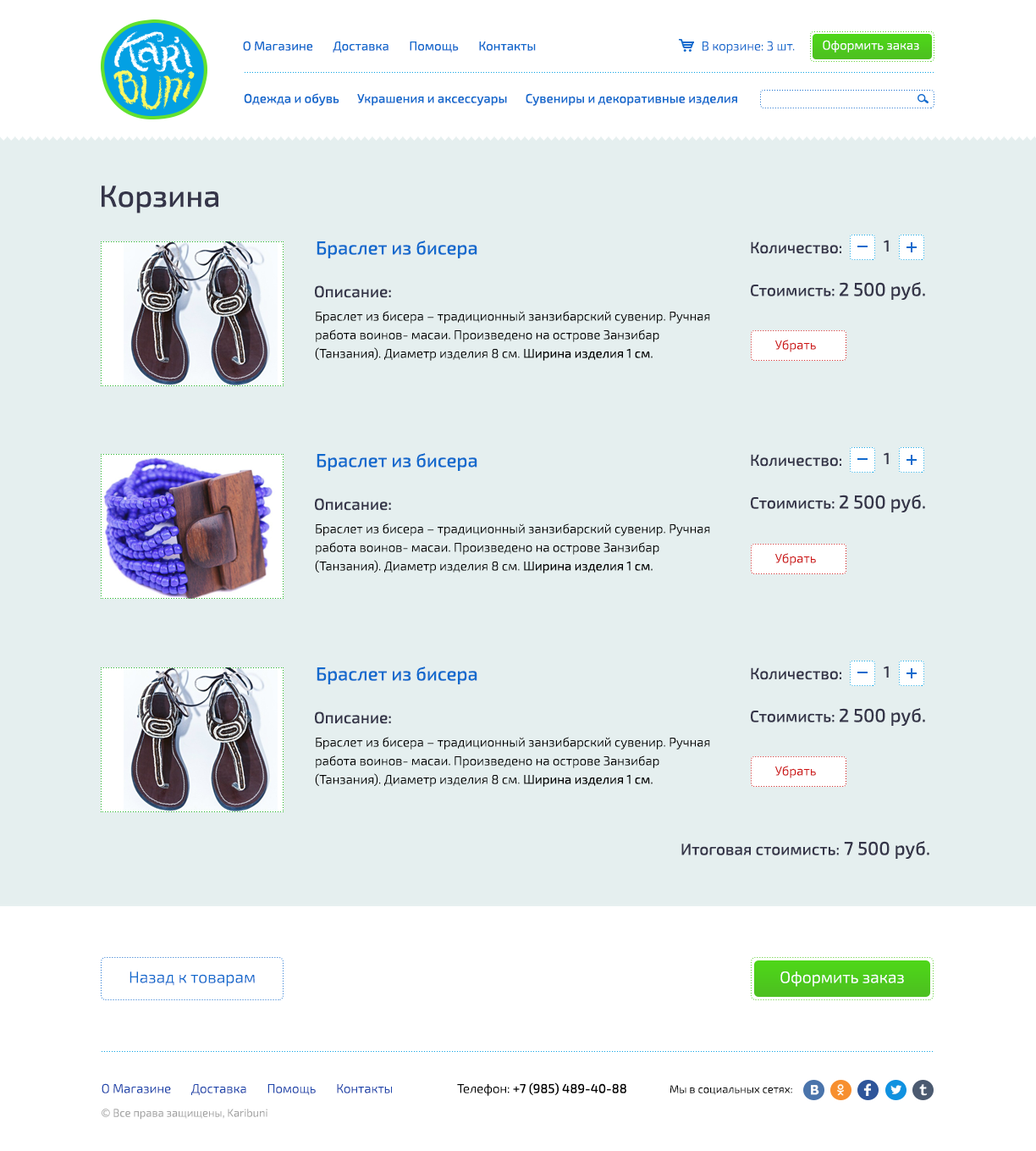
<style>
.page{position:relative;width:1036px;height:1151px;background:#e5efef}
.page>*{position:absolute;margin:0}
.t1{font:12.7px "Exo2-Regular";color:#126acd}
.t2{font:12.7px "Exo2-Light";color:#126acd}
.t3{font:12.7px "Exo2-Light";color:#ffffff}
.t4{font:12.7px "Exo2-Medium";color:#126acd}
.t5{font:30.5px "Exo2-Medium";color:#353549}
.t6{font:18.6px "Exo2-Medium";color:#126acd}
.t7{font:16.1px "Exo2-Medium";color:#353549}
.t8{font:18.6px "Exo2-Medium";color:#353549}
.t9{font:12.7px/18.6px "Exo2-Light";color:#000000}
.t10{font:12.7px/18.6px "Exo2-Regular";color:#000000}
.t11{font:12.7px "Exo2-Light";color:#cd1212}
.t12{font:16.1px "Exo2-Light";color:#126acd}
.t13{font:16.1px "Exo2-Light";color:#ffffff}
.t14{font:12.7px "Exo2-Light";color:#1e45ab}
.t15{font:12.7px "Exo2-Medium";color:#000000}
.t16{font:12.7px "Exo2-Light";color:#000000}
.t17{font:11px "Exo2-Light";color:#000000}
.t18{font:11px "Exo2-Light";color:#a3a3a3}
</style>
<div class="page">
<p class="t1" style="left:243px;top:41px;width:293px;height:11px">О Магазине       Доставка       Помощь       Контакты</p>
<p class="t2" style="left:703px;top:41px;width:92px;height:12px">В корзине: 3 шт.</p>
<p class="t3" style="left:823px;top:40px;width:96px;height:12px">Оформить заказ</p>
<p class="t4" style="left:244px;top:93px;width:493px;height:13px">Одежда и обувь       Украшения и аксессуары       Сувениры и декоративные изделия</p>
<p class="t5" style="left:102px;top:185px;width:116px;height:28px">Корзина</p>
<p class="t6" style="left:317px;top:240px;width:161px;height:18px">Браслет из бисера</p>
<p class="t7" style="left:751px;top:241px;width:91px;height:13px">Количество:</p>
<p class="t7" style="left:884px;top:240px;width:5px;height:11px">1</p>
<p class="t7" style="left:751px;top:282px;width:174px;height:18px">Стоимисть: <span class="t8">2 500 руб.</span></p>
<p class="t7" style="left:315px;top:285px;width:76px;height:13px">Описание:</p>
<p class="t9" style="left:315px;top:311px;width:395px;height:50px">Браслет из бисера – традиционный занзибарский сувенир. Ручная работа воинов- масаи. Произведено на острове Занзибар (Танзания). Диаметр изделия 8 см. <span class="t10">Ширина изделия 1 см.</span></p>
<p class="t11" style="left:776px;top:340px;width:40px;height:12px">Убрать</p>
<p class="t6" style="left:317px;top:453px;width:161px;height:18px">Браслет из бисера</p>
<p class="t7" style="left:751px;top:454px;width:91px;height:13px">Количество:</p>
<p class="t7" style="left:884px;top:452px;width:5px;height:12px">1</p>
<p class="t7" style="left:315px;top:498px;width:76px;height:13px">Описание:</p>
<p class="t7" style="left:751px;top:494px;width:174px;height:18px">Стоимисть: <span class="t8">2 500 руб.</span></p>
<p class="t9" style="left:315px;top:523px;width:395px;height:50px">Браслет из бисера – традиционный занзибарский сувенир. Ручная работа воинов- масаи. Произведено на острове Занзибар (Танзания). Диаметр изделия 8 см. <span class="t10">Ширина изделия 1 см.</span></p>
<p class="t11" style="left:776px;top:553px;width:40px;height:13px">Убрать</p>
<p class="t7" style="left:884px;top:665px;width:5px;height:12px">1</p>
<p class="t6" style="left:317px;top:666px;width:161px;height:18px">Браслет из бисера</p>
<p class="t7" style="left:751px;top:667px;width:91px;height:13px">Количество:</p>
<p class="t7" style="left:315px;top:711px;width:76px;height:13px">Описание:</p>
<p class="t7" style="left:751px;top:708px;width:174px;height:18px">Стоимисть: <span class="t8">2 500 руб.</span></p>
<p class="t9" style="left:315px;top:737px;width:395px;height:50px">Браслет из бисера – традиционный занзибарский сувенир. Ручная работа воинов- масаи. Произведено на острове Занзибар (Танзания). Диаметр изделия 8 см. <span class="t10">Ширина изделия 1 см.</span></p>
<p class="t11" style="left:776px;top:765px;width:40px;height:13px">Убрать</p>
<p class="t7" style="left:682px;top:841px;width:248px;height:18px">Итоговая стоимисть: <span class="t8">7 500 руб.</span></p>
<p class="t12" style="left:130px;top:971px;width:125px;height:15px">Назад к товарам</p>
<p class="t13" style="left:781px;top:971px;width:123px;height:15px">Оформить заказ</p>
<p class="t14" style="left:102px;top:1083px;width:290px;height:12px">О Магазине       Доставка       Помощь       Контакты</p>
<p class="t15" style="left:457px;top:1082px;width:170px;height:14px"><span class="t16">Телефон: </span>+7 (985) 489-40-88</p>
<p class="t17" style="left:671px;top:1085px;width:121px;height:10px">Мы в социальных сетях:</p>
<p class="t18" style="left:102px;top:1108px;width:166px;height:11px">© Все права защищены, Karibuni</p>
</div>
